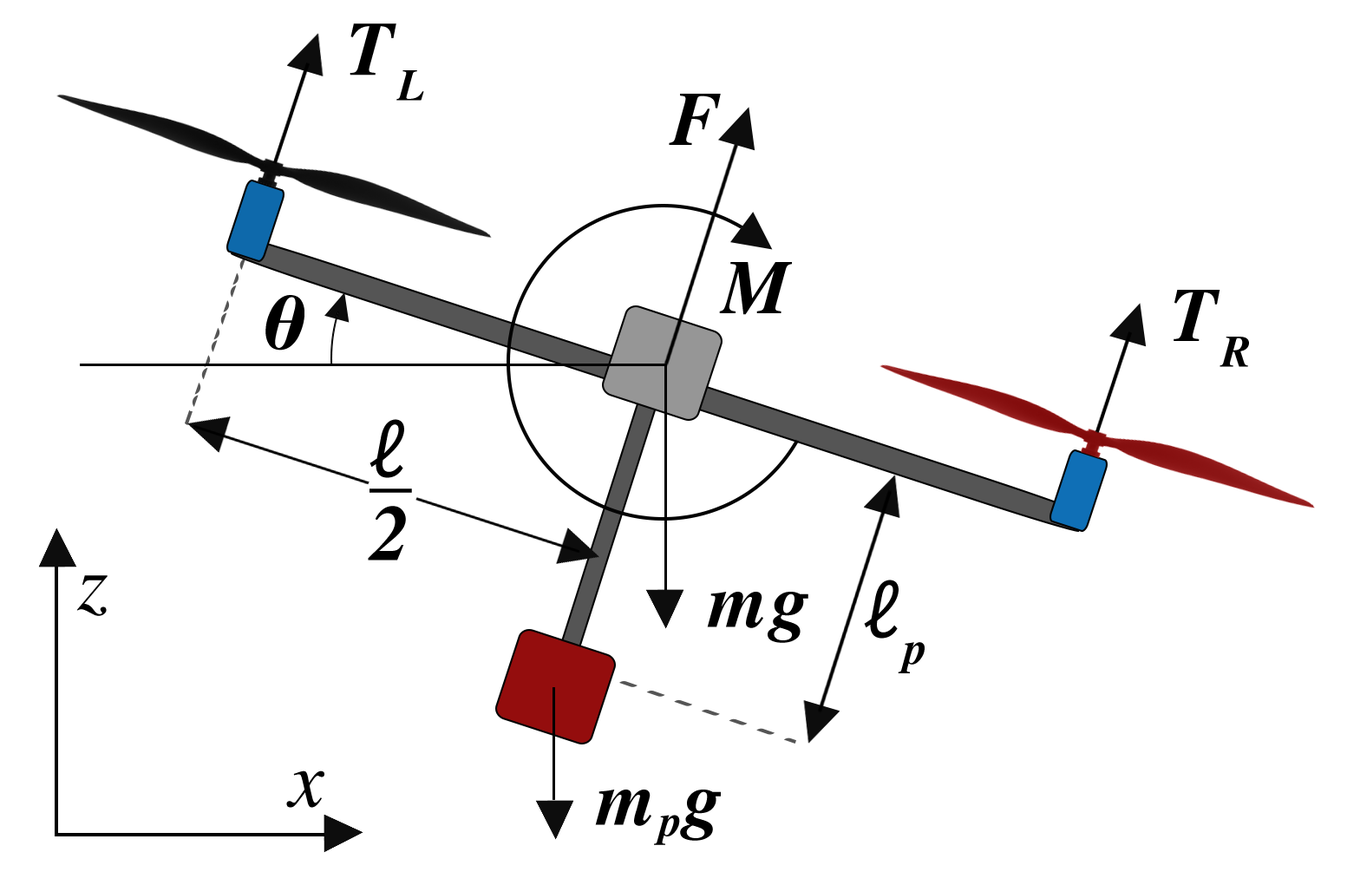
<style>
.page{position:relative;width:1347px;height:885px;background:#ffffff}
.page>*{position:absolute;margin:0}
.t1{font:76.4px "Times-BoldItalic";letter-spacing:0.05em;color:#000000}
.t2{font:79.5px "MyriadPro-It";letter-spacing:0.05em;color:#000000;text-decoration:underline}
.t3{font:79.5px "Times-BoldItalic";letter-spacing:0.05em;color:#000000}
.t4{font:79.5px "Times-Italic";letter-spacing:0.05em;color:#000000}
.t5{font:79.5px "MyriadPro-It";color:#000000}
.t6{font:79.5px "Times-BoldItalic";color:#000000}
</style>
<div class="page">
<p class="t1" style="left:350px;top:23px;width:74px;height:78px">TL</p>
<p class="t1" style="left:669px;top:94px;width:52px;height:51px">F</p>
<p class="t1" style="left:719px;top:262px;width:73px;height:53px">M</p>
<p class="t1" style="left:1174px;top:290px;width:75px;height:77px">TR</p>
<p class="t1" style="left:265px;top:295px;width:40px;height:56px">θ</p>
<p class="t2" style="left:370px;top:419px;width:42px;height:74px">ℓ</p>
<p class="t3" style="left:368px;top:506px;width:38px;height:54px">2</p>
<p class="t4" style="left:76px;top:575px;width:32px;height:41px">z</p>
<p class="t5" style="left:864px;top:580px;width:61px;height:93px">ℓ<span class="t6">p</span></p>
<p class="t1" style="left:707px;top:592px;width:102px;height:51px">mg</p>
<p class="t4" style="left:286px;top:770px;width:38px;height:38px">x</p>
<p class="t1" style="left:595px;top:790px;width:126px;height:55px">mpg</p>
</div>
